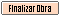
<style>
.page{position:relative;width:60px;height:16px;background:#ffd8bf}
.page>*{position:absolute;margin:0}
.t1{font:9px "Impact";color:#000000;scale:0.9 1}
</style>
<div class="page">
<p class="t1" style="left:9px;top:5px;width:42px;height:7px">FInalizar Obra</p>
</div>
